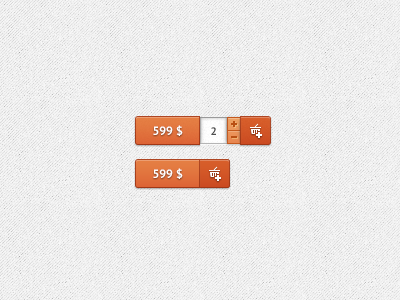
<style>
.page{position:relative;width:400px;height:300px}
.page>*{position:absolute;margin:0}
.t1{font:12px "PTSans-Bold";color:#ffffff}
.t2{font:11px "PTSans-Bold";color:#4d4d4d}
</style>
<div class="page">
<p class="t1" style="left:153px;top:125px;width:30px;height:11px">599 $</p>
<p class="t2" style="left:211px;top:127px;width:5px;height:8px">2</p>
<p class="t1" style="left:153px;top:168px;width:30px;height:11px">599 $</p>
</div>
